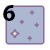
<style>
.page{position:relative;width:50px;height:50px;background:#acb7d0}
.page>*{position:absolute;margin:0}
.t1{font:24px "MyriadHebrew-Bold";color:#000000}
</style>
<div class="page">
<p class="t1" style="left:3px;top:5px;width:12px;height:16px">6</p>
</div>
